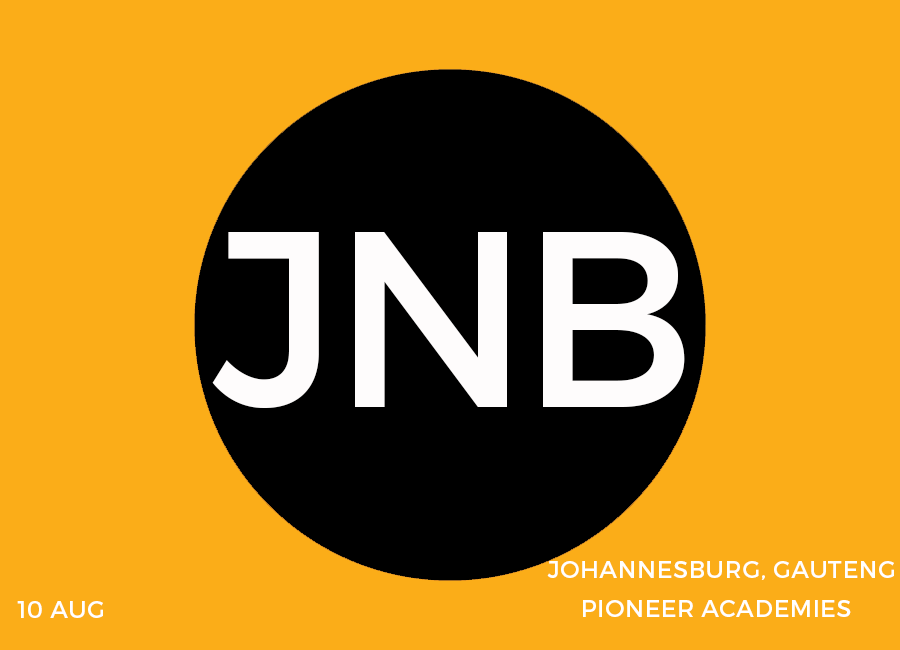
<style>
.page{position:relative;width:900px;height:650px;background:#fbad18}
.page>*{position:absolute;margin:0}
.t1{font:24px "Montserrat-Regular";letter-spacing:0.02em;color:#ffffff}
</style>
<div class="page">
<p class="t1" style="left:547px;top:561px;width:347px;height:19px">JOHANNESBURG, GAUTENG</p>
<p class="t1" style="left:17px;top:601px;width:86px;height:17px">10 AUG</p>
<p class="t1" style="left:583px;top:600px;width:268px;height:17px">PIONEER ACADEMIES</p>
</div>
